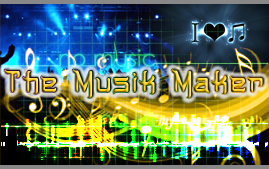
<style>
.page{position:relative;width:269px;height:169px}
.page>*{position:absolute;margin:0}
.t1{font:30px "MusicWarrior";scale:0.97 1}
</style>
<div class="page">
<p class="t1" style="left:4px;top:69px;width:259px;height:29px">The Musik Maker</p>
</div>
